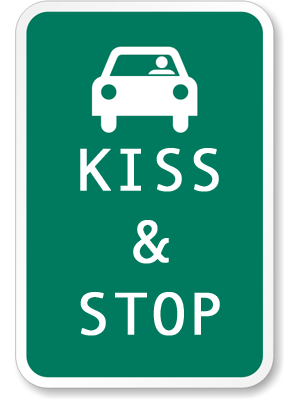
<style>
.page{position:relative;width:300px;height:400px;background:#007a5e}
.page>*{position:absolute;margin:0}
.t1{font:60px "AndaleMono";color:#ffffff;font-weight:bold}
</style>
<div class="page">
<p class="t1" style="left:80px;top:148px;width:140px;height:188px;text-align:center">KISS<br>&amp;<br>STOP</p>
</div>
